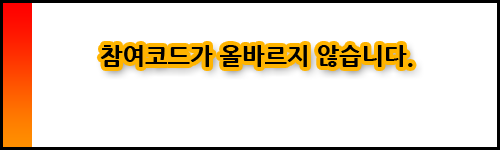
<style>
.page{position:relative;width:500px;height:150px;background:#ffffff}
.page>*{position:absolute;margin:0}
.t1{font:24px "NanumGothicExtraBold";color:#000000}
</style>
<div class="page">
<p class="t1" style="left:100px;top:45px;width:313px;height:22px">참여코드가 올바르지 않습니다.</p>
</div>
